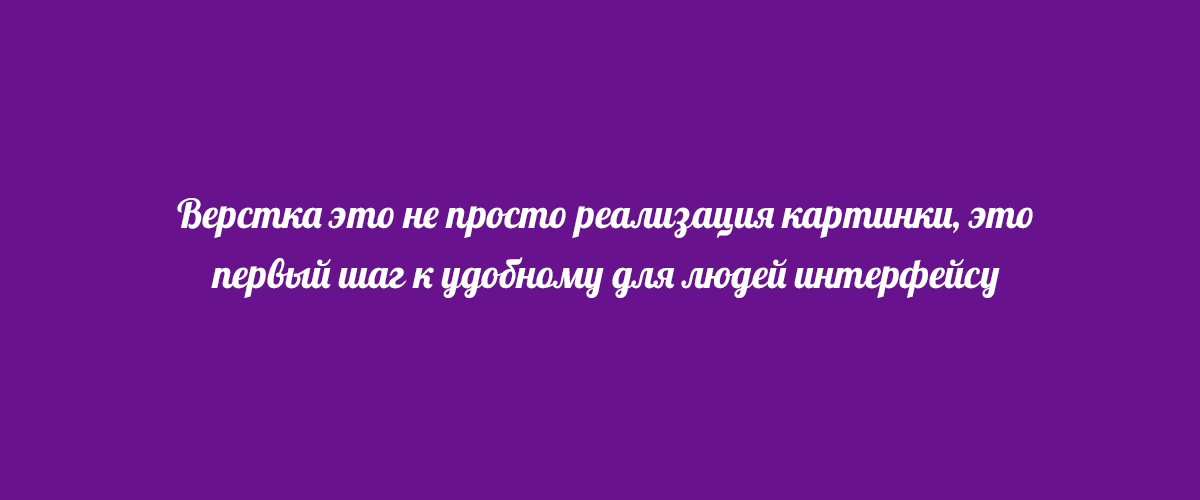
<style>
.page{position:relative;width:1200px;height:500px;background:#69128d}
.page>*{position:absolute;margin:0}
.t1{font:40px/60px "Lobster-Regular";color:#ffffff}
</style>
<div class="page">
<p class="t1" style="left:177px;top:198px;width:856px;height:100px;text-align:center">Верстка это не просто реализация картинки, это первый шаг к удобному для людей интерфейсу</p>
</div>
